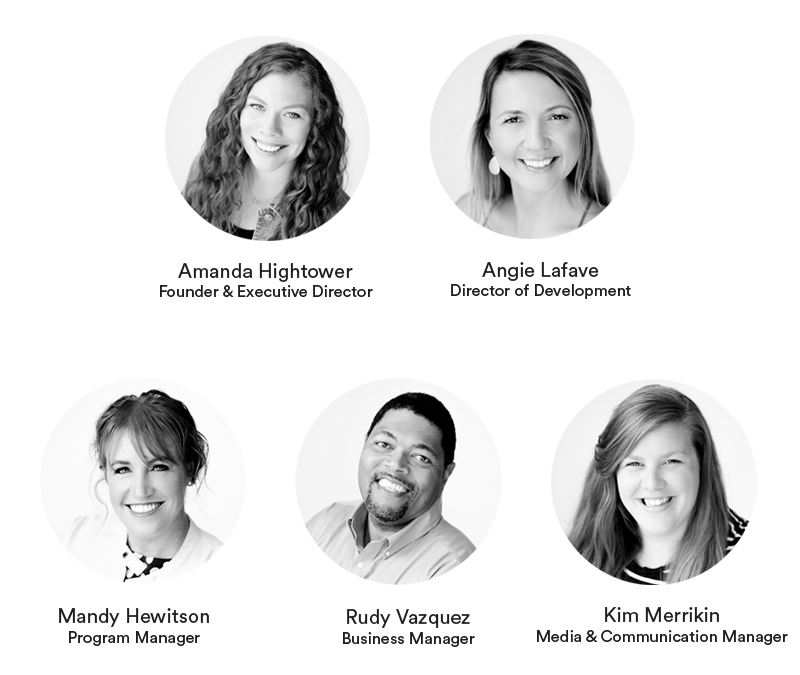
<style>
.page{position:relative;width:800px;height:675px;background:#ffffff}
.page>*{position:absolute;margin:0}
.t1{font:16.4px "CircularStd-Book";color:#1f1f1f}
.t2{font:20px "CircularStd-Book";color:#1f1f1f}
</style>
<div class="page">
<p class="t1" style="left:160px;top:263px;width:213px;height:34px;text-align:center"><span class="t2">Amanda Hightower<br></span>Founder &amp; Executive Director</p>
<p class="t1" style="left:451px;top:262px;width:180px;height:37px;text-align:center"><span class="t2">Angie Lafave<br></span>Director of Development</p>
<p class="t1" style="left:59px;top:608px;width:150px;height:38px;text-align:center"><span class="t2">Mandy Hewitson<br></span>Program Manager</p>
<p class="t1" style="left:343px;top:609px;width:132px;height:38px;text-align:center"><span class="t2">Rudy Vazquez<br></span>Business Manager</p>
<p class="t1" style="left:537px;top:607px;width:251px;height:38px;text-align:center"><span class="t2">Kim Merrikin<br></span>Media &amp; Communication Manager</p>
</div>
